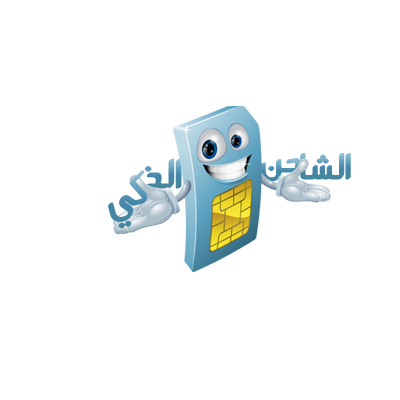
<style>
.page{position:relative;width:400px;height:400px;background:#ffffff}
.page>*{position:absolute;margin:0}
.t1{font:37.5px "FP_Arsoo";font-weight:bold}
.t2{font:33.3px "FP_Arsoo";font-weight:bold}
.t3{font:37.5px "FP_Arsoo";color:#4687a9;font-weight:bold}
</style>
<div class="page">
<p class="t1" style="left:144px;top:158px;width:38px;height:31px">الذ</p>
<p class="t2" style="left:260px;top:158px;width:41px;height:24px">حن</p>
<p class="t2" style="left:300px;top:153px;width:51px;height:27px">الشا</p>
<p class="t3" style="left:108px;top:170px;width:40px;height:59px;rotate:-15deg">كي</p>
</div>
